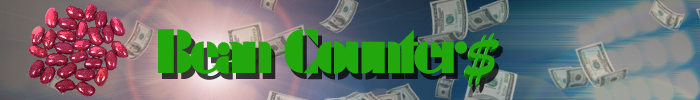
<style>
.page{position:relative;width:700px;height:100px}
.page>*{position:absolute;margin:0}
.t1{font:66.7px "Futura_Poster-Light";letter-spacing:-0.075em;color:#22a70c}
</style>
<div class="page">
<p class="t1" style="left:158px;top:29px;width:309px;height:45px">Bean Counter</p>
</div>
